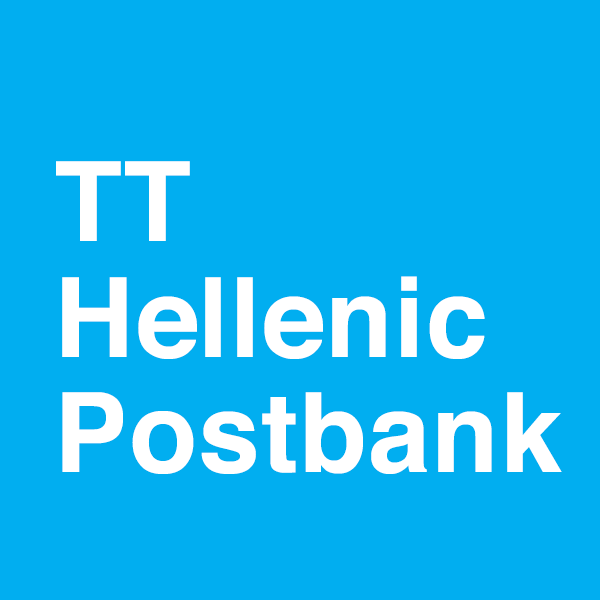
<style>
.page{position:relative;width:600px;height:600px;background:#01aef0}
.page>*{position:absolute;margin:0}
.t1{font:111px/115.5px "Helvetica-Bold";letter-spacing:0.01em;color:#fffffe}
</style>
<div class="page">
<p class="t1" style="left:56px;top:161px;width:506px;height:313px">TT <br>Hellenic<br>Postbank</p>
</div>
